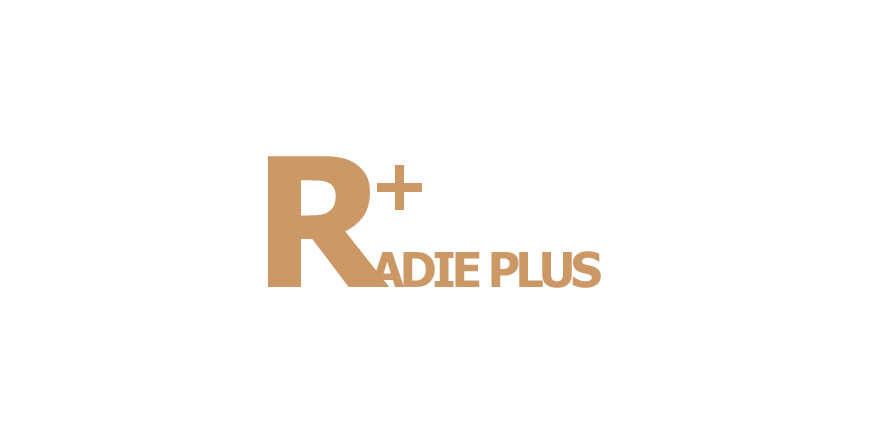
<style>
.page{position:relative;width:870px;height:444px;background:#ffffff}
.page>*{position:absolute;margin:0}
.t1{font:48.1px "Tahoma-Bold";letter-spacing:-0.08em;color:#cc9966}
.t2{font:180.1px "Tahoma-Bold";letter-spacing:-0.08em;color:#cc9966}
.t3{font:71.1px "Tahoma-Bold";letter-spacing:-0.08em;color:#cc9966}
</style>
<div class="page">
<p class="t1" style="left:268px;top:156px;width:333px;height:132px"><span class="t2">R</span>ADIE PLUS</p>
<p class="t3" style="left:377px;top:165px;width:45px;height:45px">+</p>
</div>
